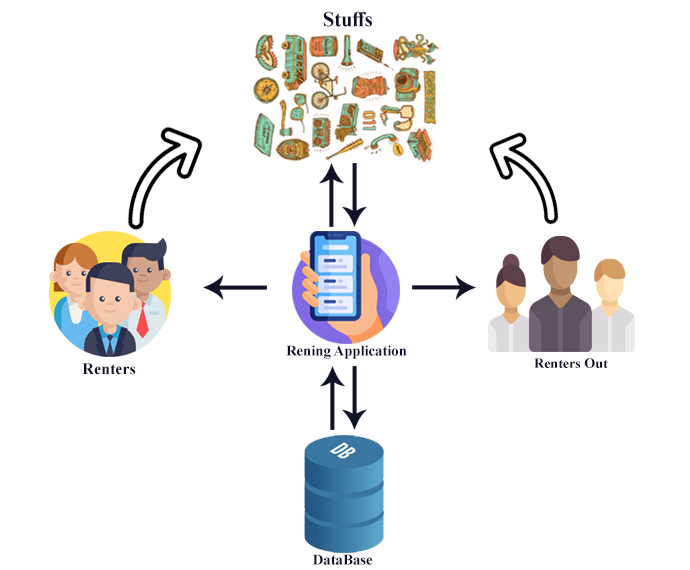
<style>
.page{position:relative;width:690px;height:570px;background:#ffffff}
.page>*{position:absolute;margin:0}
.t1{font:21.5px "TimesNewRomanPS-BoldMT";color:#101229;scale:0.96 1}
.t2{font:14.6px "TimesNewRomanPS-BoldMT";color:#101229}
.t3{font:16px "TimesNewRomanPS-BoldMT";color:#101229}
.t4{font:14px "TimesNewRomanPS-BoldMT";color:#101229}
.t5{font:14.8px "TimesNewRomanPS-BoldMT";color:#101229}
</style>
<div class="page">
<p class="t1" style="left:323px;top:11px;width:49px;height:16px">Stuffs</p>
<p class="t2" style="left:286px;top:345px;width:121px;height:14px">Rening Application</p>
<p class="t3" style="left:82px;top:363px;width:54px;height:12px">Renters</p>
<p class="t4" style="left:534px;top:358px;width:74px;height:10px">Renters Out</p>
<p class="t5" style="left:312px;top:554px;width:61px;height:11px">DataBase</p>
</div>
